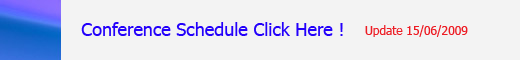
<style>
.page{position:relative;width:520px;height:60px;background:#f3f3f3}
.page>*{position:absolute;margin:0}
.t1{font:18px "Tahoma";color:#2300fb}
.t2{font:12px "Tahoma";color:#ed1c24}
</style>
<div class="page">
<p class="t1" style="left:81px;top:22px;width:262px;height:14px">Conference Schedule Click Here !</p>
<p class="t2" style="left:365px;top:25px;width:103px;height:12px">Update 15/06/2009</p>
</div>
